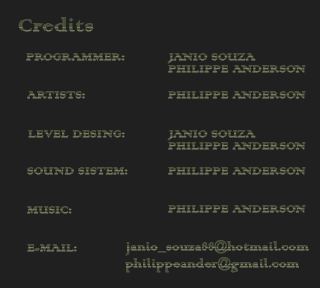
<style>
.page{position:relative;width:320px;height:288px;background:#202020}
.page>*{position:absolute;margin:0}
.t1{font:24px "ColonnaMT";color:#4d533c;font-weight:bold}
.t2{font:14px "ColonnaMT";color:#4d533c;font-weight:bold}
.t3{font:15px "ColonnaMT";color:#4d533c;font-weight:bold}
</style>
<div class="page">
<p class="t1" style="left:18px;top:17px;width:76px;height:15px">Credits</p>
<p class="t2" style="left:26px;top:53px;width:99px;height:8px">PROGRAMMER:</p>
<p class="t2" style="left:167px;top:53px;width:89px;height:11px">JANIO SOUZA</p>
<p class="t2" style="left:168px;top:65px;width:138px;height:8px">PHILIPPE ANDERSON</p>
<p class="t2" style="left:27px;top:91px;width:58px;height:8px">ARTISTS:</p>
<p class="t2" style="left:168px;top:91px;width:138px;height:8px">PHILIPPE ANDERSON</p>
<p class="t2" style="left:28px;top:130px;width:97px;height:8px">LEVEL DESING:</p>
<p class="t2" style="left:167px;top:130px;width:89px;height:11px">JANIO SOUZA</p>
<p class="t2" style="left:168px;top:142px;width:138px;height:8px">PHILIPPE ANDERSON</p>
<p class="t2" style="left:27px;top:167px;width:101px;height:8px">SOUND SISTEM:</p>
<p class="t2" style="left:168px;top:167px;width:138px;height:8px">PHILIPPE ANDERSON</p>
<p class="t2" style="left:27px;top:206px;width:45px;height:8px">MUSIC:</p>
<p class="t2" style="left:168px;top:205px;width:138px;height:8px">PHILIPPE ANDERSON</p>
<p class="t2" style="left:27px;top:244px;width:50px;height:8px">E-MAIL:</p>
<p class="t3" style="left:125px;top:240px;width:184px;height:16px">janio_souza88@hotmail.com</p>
<p class="t3" style="left:125px;top:257px;width:174px;height:16px">philippeander@gmail.com</p>
</div>
